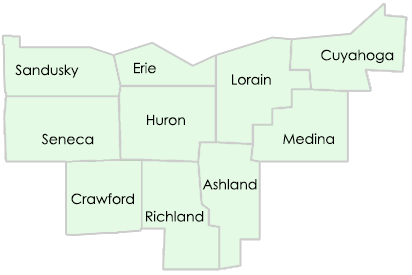
<style>
.page{position:relative;width:412px;height:275px;background:#e5fae5}
.page>*{position:absolute;margin:0}
.t1{font:14px "CenturyGothic";color:#000000}
</style>
<div class="page">
<p class="t1" style="left:321px;top:49px;width:73px;height:14px">Cuyahoga</p>
<p class="t1" style="left:15px;top:64px;width:64px;height:14px">Sandusky</p>
<p class="t1" style="left:134px;top:62px;width:22px;height:12px">Erie</p>
<p class="t1" style="left:232px;top:74px;width:39px;height:11px">Lorain</p>
<p class="t1" style="left:147px;top:114px;width:38px;height:12px">Huron</p>
<p class="t1" style="left:41px;top:133px;width:53px;height:12px">Seneca</p>
<p class="t1" style="left:283px;top:133px;width:51px;height:12px">Medina</p>
<p class="t1" style="left:202px;top:179px;width:55px;height:11px">Ashland</p>
<p class="t1" style="left:71px;top:193px;width:63px;height:12px">Crawford</p>
<p class="t1" style="left:146px;top:210px;width:58px;height:12px">Richland</p>
</div>
